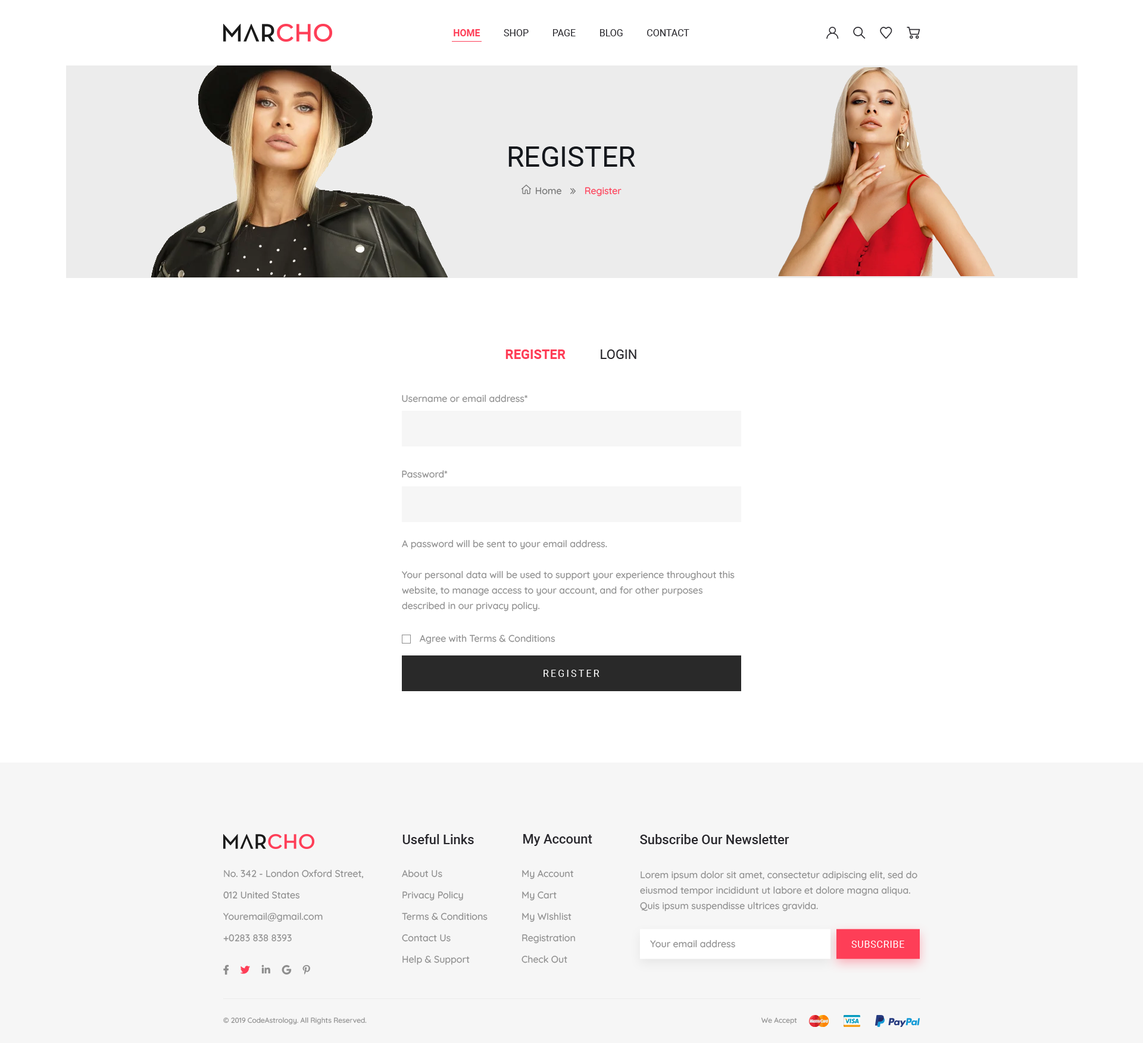
<style>
.page{position:relative;width:1143px;height:1043px;background:#ffffff}
.page>*{position:absolute;margin:0}
.t1{font:9.5px "Roboto-Regular";color:#29282d}
.t2{font:9.5px "Roboto-Bold";color:#fe3e57}
.t3{font:28.6px "Roboto-Regular";color:#15181d}
.t4{font:9.5px "Quicksand-Medium";color:#727272}
.t5{font:9.5px "Quicksand-Medium";color:#fe3e57}
.t6{font:13.1px "Roboto-Bold";color:#fe3e57}
.t7{font:13.1px "Roboto-Regular";color:#29282d}
.t8{font:9.5px "Quicksand-Medium";color:#8d8d8d}
.t9{font:9.5px/15.5px "Quicksand-Medium";color:#8d8d8d}
.t10{font:9.5px "Roboto-Regular";letter-spacing:0.2em;color:#ffffff}
.t11{font:13.1px "Roboto-Medium";color:#29282d}
.t12{font:9.5px/21.4px "Quicksand-Medium";color:#8d8d8d}
.t13{font:9.5px "Roboto-Regular";letter-spacing:0.05em;color:#ffffff;text-transform:uppercase}
.t14{font:7.1px "Quicksand-Medium";color:#8d8d8d}
</style>
<div class="page">
<p class="t1" style="left:454px;top:29px;width:235px;height:7px"><span class="t2">HOME          </span>SHOP          PAGE          BLOG          CONTACT</p>
<p class="t3" style="left:508px;top:146px;width:127px;height:21px">REGISTER</p>
<p class="t4" style="left:536px;top:187px;width:25px;height:8px">Home</p>
<p class="t5" style="left:585px;top:187px;width:37px;height:9px">Register</p>
<p class="t6" style="left:505px;top:349px;width:61px;height:10px">REGISTER</p>
<p class="t7" style="left:601px;top:349px;width:35px;height:10px">LOGIN</p>
<p class="t8" style="left:402px;top:395px;width:126px;height:7px">Username or email address*</p>
<p class="t8" style="left:402px;top:470px;width:46px;height:8px">Password*</p>
<p class="t9" style="left:402px;top:540px;width:333px;height:71px">A password will be sent to your email address.<br><br>Your personal data will be used to support your experience throughout this website, to manage access to your account, and for other purposes described in our privacy policy.</p>
<p class="t8" style="left:420px;top:635px;width:135px;height:9px">Agree with Terms &amp; Conditions</p>
<p class="t10" style="left:544px;top:670px;width:56px;height:7px">REGISTER</p>
<p class="t11" style="left:402px;top:834px;width:72px;height:10px">Useful Links</p>
<p class="t11" style="left:523px;top:834px;width:69px;height:12px">My Account</p>
<p class="t11" style="left:640px;top:834px;width:149px;height:10px">Subscribe Our Newsletter</p>
<p class="t12" style="left:223px;top:870px;width:141px;height:72px">No. 342 - London Oxford Street,<br>012 United States<br>Youremail@gmail.com<br>+0283 838 8393</p>
<p class="t12" style="left:402px;top:870px;width:86px;height:95px">About Us<br>Privacy Policy<br>Terms &amp; Conditions<br>Contact Us<br>Help &amp; Support</p>
<p class="t12" style="left:522px;top:870px;width:53px;height:93px">My Account<br>My Cart<br>My WIshlist<br>Registration<br>Check Out</p>
<p class="t9" style="left:640px;top:871px;width:277px;height:41px">Lorem ipsum dolor sit amet, consectetur adipiscing elit, sed do eiusmod tempor incididunt ut labore et dolore magna aliqua. Quis ipsum suspendisse ultrices gravida.</p>
<p class="t8" style="left:650px;top:940px;width:85px;height:8px">Your email address</p>
<p class="t13" style="left:851px;top:941px;width:53px;height:7px">Subscribe</p>
<p class="t14" style="left:223px;top:1018px;width:144px;height:7px">© 2019 CodeAstrology. All Rights Reserved.</p>
<p class="t14" style="left:761px;top:1018px;width:36px;height:7px">We Accept</p>
</div>
